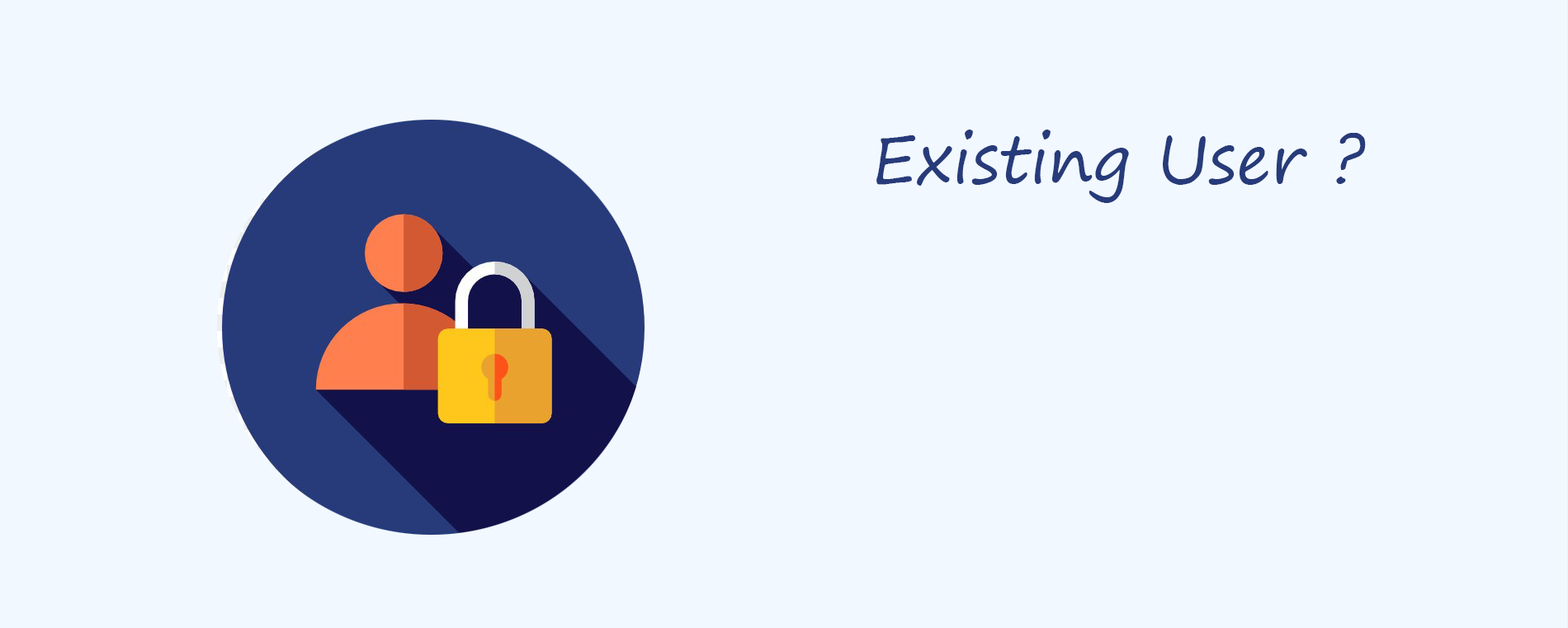
<style>
.page{position:relative;width:1568px;height:628px;background:#f1f8ff}
.page>*{position:absolute;margin:0}
.t1{font:66px "SegoePrint";color:#273b7a}
</style>
<div class="page">
<p class="t1" style="left:876px;top:130px;width:490px;height:73px">Existing User ?</p>
</div>
